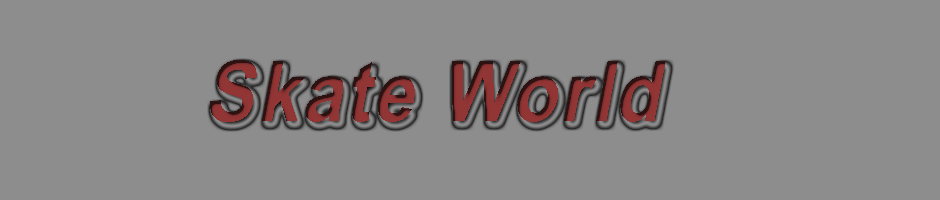
<style>
.page{position:relative;width:940px;height:200px;background:#8d8d8d}
.page>*{position:absolute;margin:0}
.t1{font:84px "ArialNarrow-Bold";letter-spacing:0.05em;font-style:italic;scale:1.07 1}
</style>
<div class="page">
<p class="t1" style="left:210px;top:60px;width:456px;height:62px">Skate World</p>
</div>
